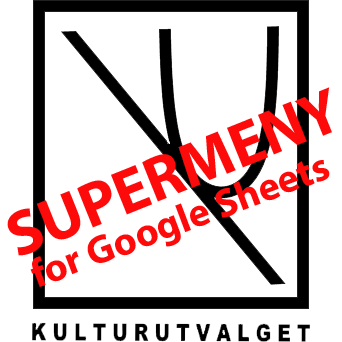
<style>
.page{position:relative;width:342px;height:342px;background:#ffffff}
.page>*{position:absolute;margin:0}
.t1{font:63.3px "MyriadPro-Bold";color:#fd0a0a}
.t2{font:40px "MyriadPro-Bold";color:#fd0a0a}
</style>
<div class="page">
<p class="t1" style="left:7px;top:87px;width:325px;height:169px;rotate:-22deg">SUPERMENY</p>
<p class="t2" style="left:30px;top:160px;width:300px;height:127px;rotate:-21deg">for Google Sheets</p>
</div>
